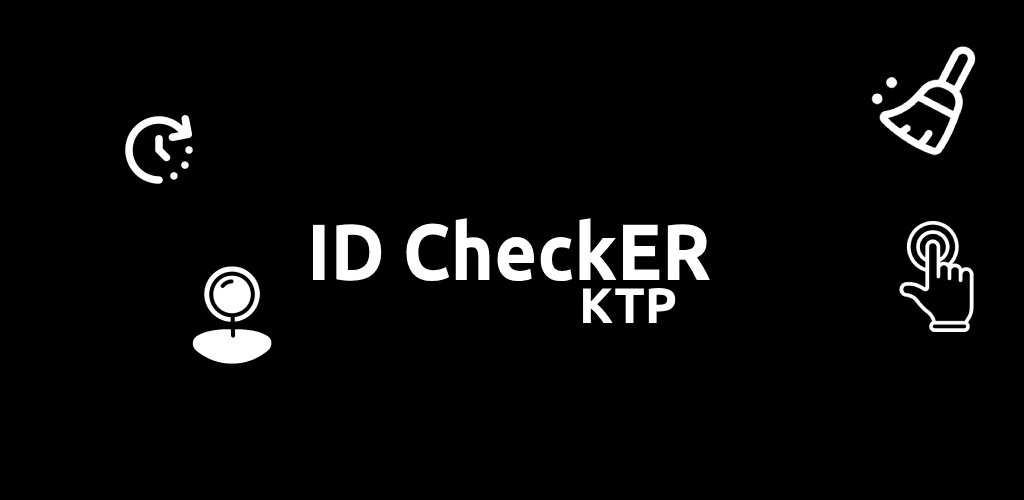
<style>
.page{position:relative;width:1024px;height:500px;background:#000000}
.page>*{position:absolute;margin:0}
.t1{font:79.6px "Ubuntu-Bold";color:#ffffff;scale:0.93 1}
.t2{font:49.8px "Ubuntu-Bold";color:#ffffff}
</style>
<div class="page">
<p class="t1" style="left:313px;top:218px;width:397px;height:63px">ID CheckER</p>
<p class="t2" style="left:583px;top:288px;width:93px;height:35px">KTP</p>
</div>
